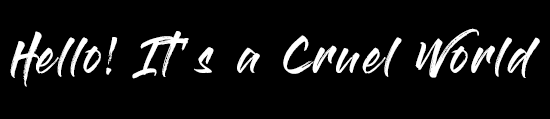
<style>
.page{position:relative;width:550px;height:119px;background:#000000}
.page>*{position:absolute;margin:0}
.t1{font:36px "GlossAndBloom";letter-spacing:0.1em;color:#ffffff}
</style>
<div class="page">
<p class="t1" style="left:10px;top:28px;width:530px;height:59px">Hello! It's a Cruel World</p>
</div>
